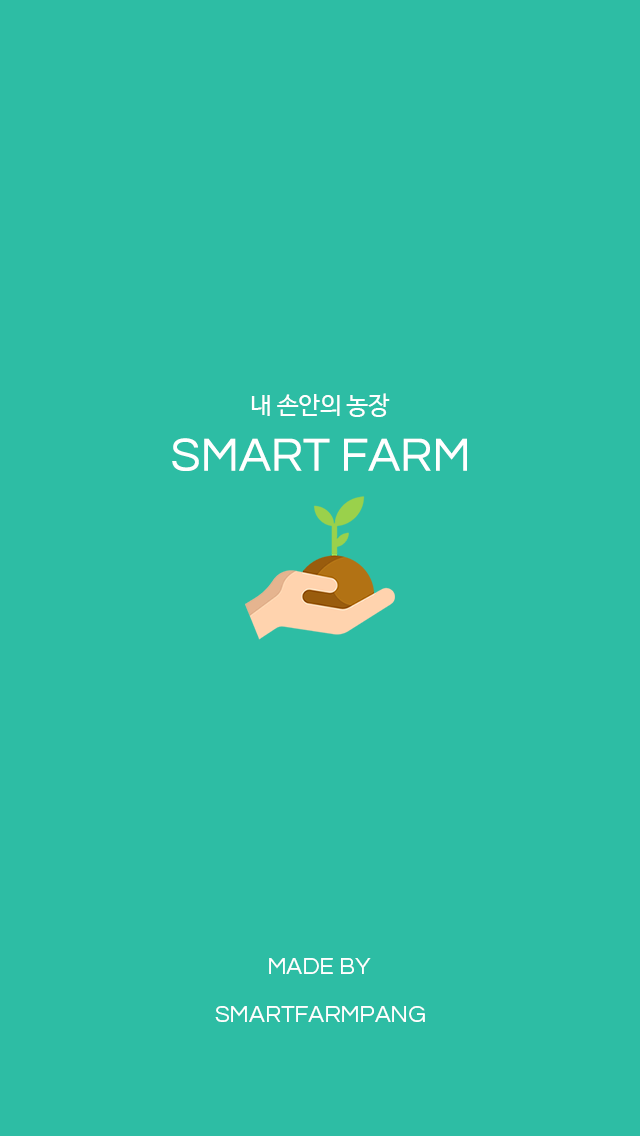
<style>
.page{position:relative;width:640px;height:1136px;background:#2dbda4}
.page>*{position:absolute;margin:0}
.t1{font:24px "NanumBarunGothic";color:#ffffff}
.t2{font:48px "Questrial-Regular";color:#ffffff}
.t3{font:24px "Questrial-Regular";color:#ffffff}
</style>
<div class="page">
<p class="t1" style="left:251px;top:393px;width:139px;height:24px">내 손안의 농장</p>
<p class="t2" style="left:172px;top:438px;width:295px;height:33px">SMART FARM</p>
<p class="t3" style="left:269px;top:958px;width:102px;height:16px">MADE BY</p>
<p class="t3" style="left:215px;top:1006px;width:210px;height:16px">SMARTFARMPANG</p>
</div>
